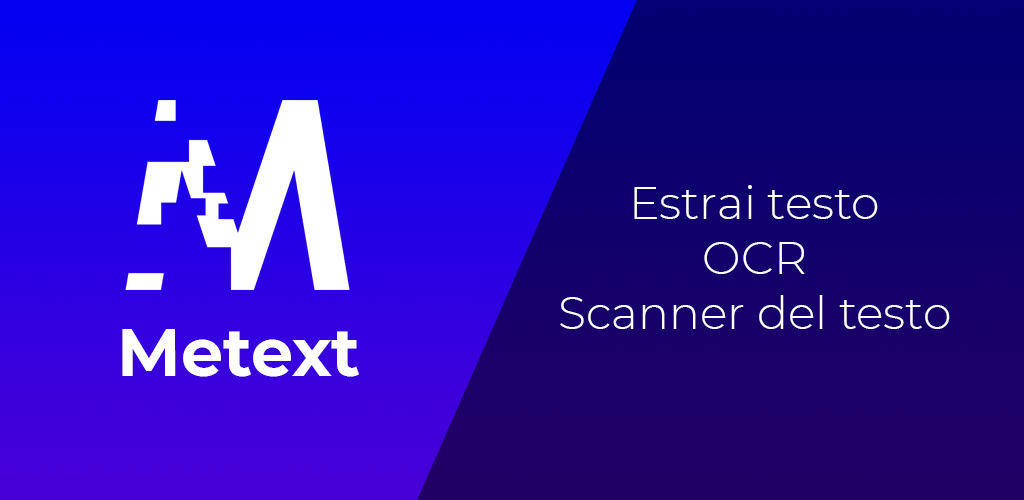
<style>
.page{position:relative;width:1024px;height:500px}
.page>*{position:absolute;margin:0}
.t1{font:45.8px "Montserrat-Light";color:#ffffff}
.t2{font:66.7px "Montserrat-Bold";color:#ffffff}
</style>
<div class="page">
<p class="t1" style="left:560px;top:185px;width:390px;height:144px;text-align:center">Estrai testo<br>OCR<br>Scanner del testo</p>
<p class="t2" style="left:122px;top:329px;width:237px;height:48px">Metext</p>
</div>
